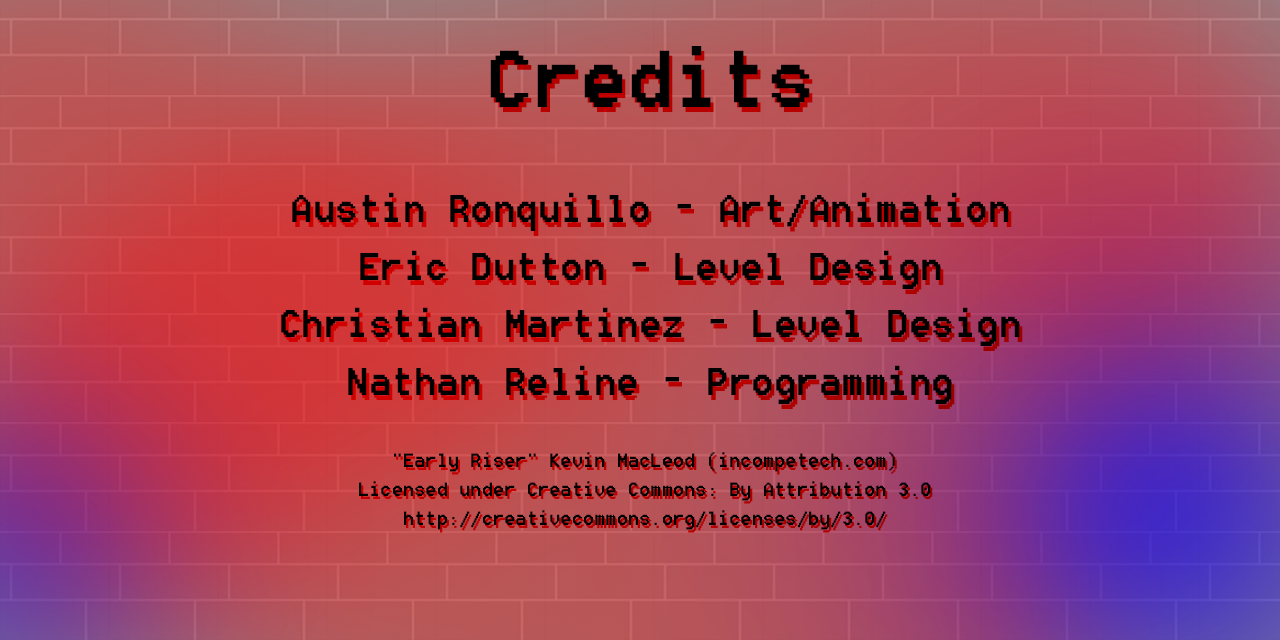
<style>
.page{position:relative;width:1280px;height:640px}
.page>*{position:absolute;margin:0}
.t1{font:48px "8514oem";color:#000000}
.t2{font:100px "8514oem";color:#000000}
.t3{font:24px "8514oem";color:#000000}
</style>
<div class="page">
<p class="t1" style="left:281px;top:46px;width:739px;height:358px;text-align:center"><span class="t2">Credits</span><br><br>Austin Ronquillo - Art/Animation<br>Eric Dutton - Level Design<br>Christian Martinez - Level Design<br>Nathan Reline - Programming</p>
<p class="t3" style="left:359px;top:452px;width:572px;height:78px;text-align:center">"Early Riser" Kevin MacLeod (incompetech.com) <br>Licensed under Creative Commons: By Attribution 3.0<br>http://creativecommons.org/licenses/by/3.0/</p>
</div>
